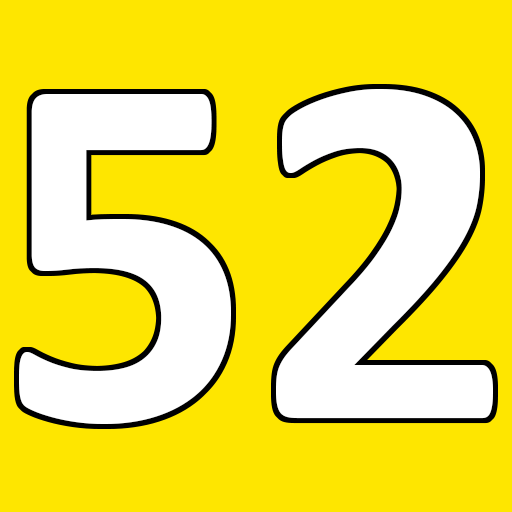
<style>
.page{position:relative;width:512px;height:512px;background:#fee600}
.page>*{position:absolute;margin:0}
.t1{font:511.5px "Calibri-Bold";color:#ffffff}
</style>
<div class="page">
<p class="t1" style="left:19px;top:89px;width:474px;height:335px">52</p>
</div>
